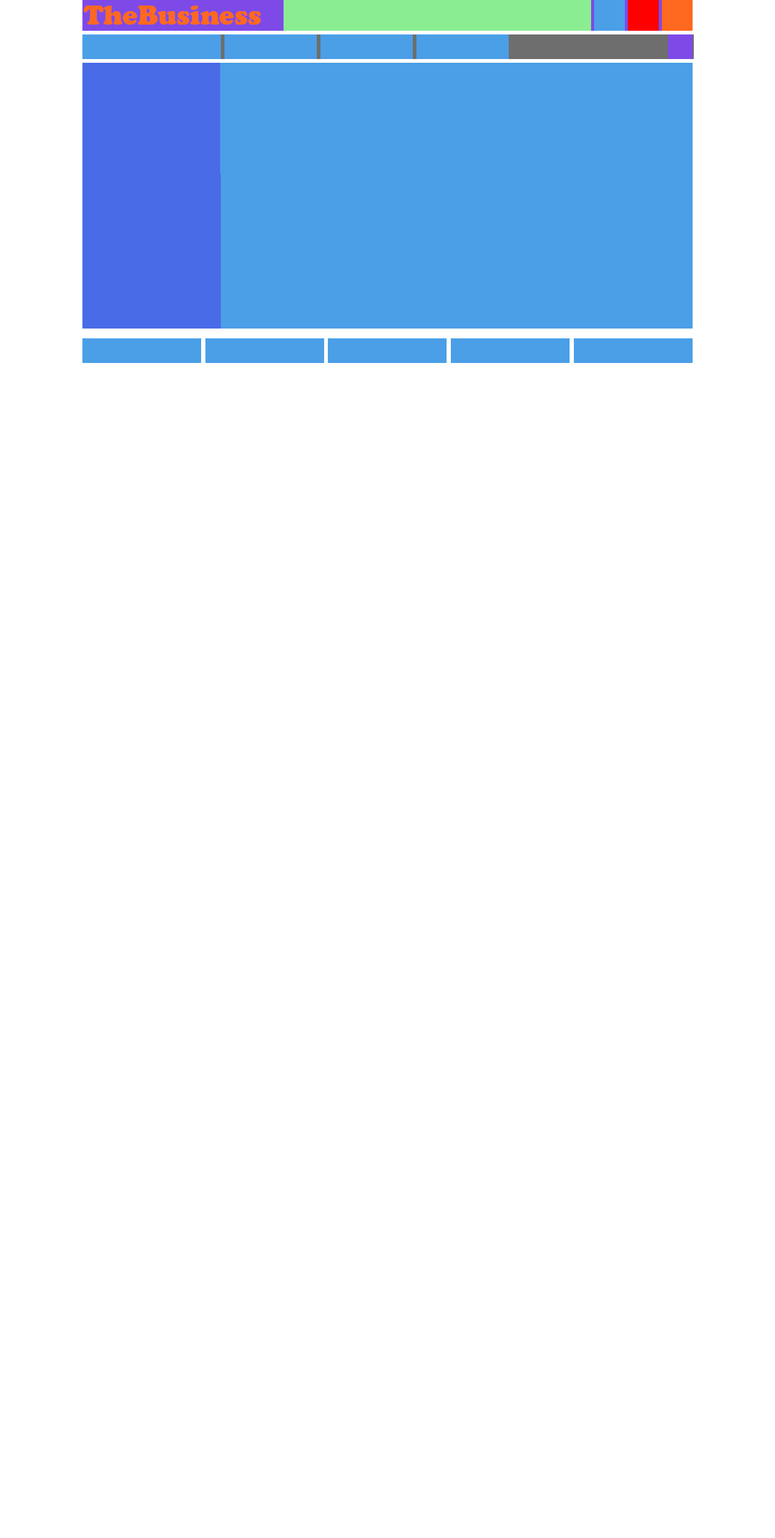
<style>
.page{position:relative;width:775px;height:1538px;background:#ffffff}
.page>*{position:absolute;margin:0}
.t1{font:28.2px "CooperBlack";color:#ff681f}
</style>
<div class="page">
<p class="t1" style="left:84px;top:6px;width:177px;height:19px">TheBusiness</p>
</div>
